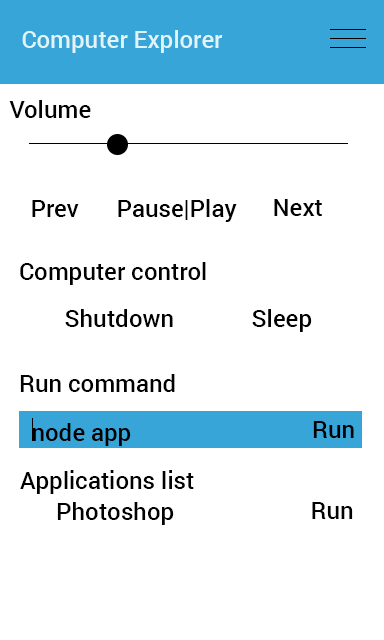
<style>
.page{position:relative;width:384px;height:640px;background:#ffffff}
.page>*{position:absolute;margin:0}
.t1{font:24px "Roboto-Medium";color:#e1f4fa}
.t2{font:24px "Roboto-Medium";color:#010101}
.t3{font:24px "Roboto-Medium";color:#000000}
</style>
<div class="page">
<p class="t1" style="left:22px;top:30px;width:201px;height:23px">Computer Explorer</p>
<p class="t2" style="left:9px;top:100px;width:82px;height:18px">Volume</p>
<p class="t3" style="left:32px;top:200px;width:47px;height:17px">Prev</p>
<p class="t3" style="left:118px;top:199px;width:119px;height:23px">Pause|Play</p>
<p class="t3" style="left:274px;top:199px;width:48px;height:17px">Next</p>
<p class="t3" style="left:20px;top:262px;width:186px;height:23px">Computer control</p>
<p class="t3" style="left:65px;top:309px;width:247px;height:23px">Shutdown             Sleep</p>
<p class="t3" style="left:20px;top:374px;width:155px;height:18px">Run command</p>
<p class="t3" style="left:33px;top:423px;width:98px;height:23px">node app</p>
<p class="t3" style="left:313px;top:421px;width:41px;height:17px">Run</p>
<p class="t3" style="left:20px;top:470px;width:174px;height:24px">Applications list</p>
<p class="t3" style="left:57px;top:502px;width:117px;height:23px">Photoshop</p>
<p class="t3" style="left:312px;top:502px;width:41px;height:17px">Run</p>
</div>
